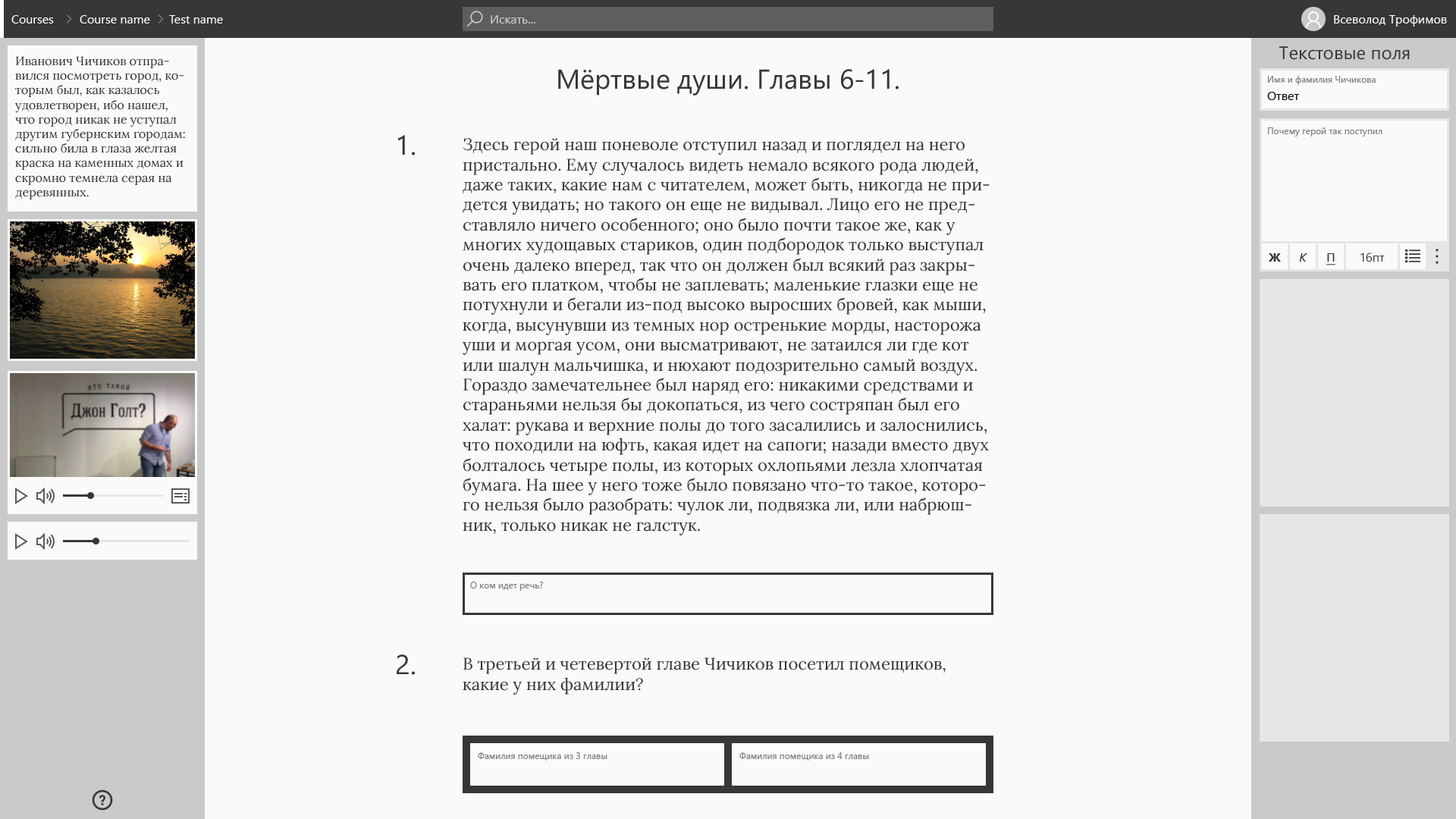
<style>
.page{position:relative;width:1456px;height:819px;background:#fafafa}
.page>*{position:absolute;margin:0}
.t1{font:12.1px "SegoeUI";color:#fafafa}
.t2{font:12.1px "SegoeUI";color:#cacaca}
.t3{font:18.2px "SegoeUI";color:#373737}
.t4{font:12.1px "Lora-Regular";color:#373737}
.t5{font:27.3px "SegoeUI";color:#373737}
.t6{font:9.1px "SegoeUI";color:#808080}
.t7{font:12.1px "SegoeUI";color:#0f0f0f}
.t8{font:16.7px "Lora-Regular";color:#373737}
.t9{font:12.1px "SegoeUI-Bold";color:#373737}
.t10{font:12.1px "SegoeUI-Italic";color:#373737}
.t11{font:12.1px "SegoeUI";color:#373737;text-decoration:underline}
.t12{font:12.1px "SegoeUI";color:#373737}
</style>
<div class="page">
<p class="t1" style="left:11px;top:15px;width:43px;height:9px">Courses</p>
<p class="t1" style="left:80px;top:15px;width:70px;height:9px">Course name</p>
<p class="t1" style="left:169px;top:15px;width:54px;height:9px">Test name</p>
<p class="t2" style="left:491px;top:15px;width:44px;height:9px">Искать...</p>
<p class="t1" style="left:1334px;top:15px;width:113px;height:12px">Всеволод Трофимов</p>
<p class="t3" style="left:1279px;top:46px;width:131px;height:14px">Текстовые поля</p>
<p class="t4" style="left:15px;top:56px;width:170px;height:143px">Иванович Чичиков отправился посмотреть город, которым был, как казалось удовлетворен, ибо нашел, что город никак не уступал другим губернским городам: сильно била в глаза желтая краска на каменных домах и скромно темнела серая на деревянных.</p>
<p class="t5" style="left:558px;top:69px;width:341px;height:27px">Мёртвые души. Главы 6-11.</p>
<p class="t6" style="left:1268px;top:76px;width:108px;height:9px">Имя и фамилия Чичикова</p>
<p class="t7" style="left:1267px;top:92px;width:32px;height:8px">Ответ</p>
<p class="t5" style="left:398px;top:135px;width:17px;height:20px">1.</p>
<p class="t6" style="left:1268px;top:127px;width:114px;height:9px">Почему герой так поступил</p>
<p class="t8" style="left:463px;top:138px;width:527px;height:397px">Здесь герой наш поневоле отступил назад и поглядел на него пристально. Ему случалось видеть немало всякого рода людей, даже таких, какие нам с читателем, может быть, никогда не придется увидать; но такого он еще не видывал. Лицо его не представляло ничего особенного; оно было почти такое же, как у многих худощавых стариков, один подбородок только выступал очень далеко вперед, так что он должен был всякий раз закрывать его платком, чтобы не заплевать; маленькие глазки еще не потухнули и бегали из-под высоко выросших бровей, как мыши, когда, высунувши из темных нор остренькие морды, насторожа уши и моргая усом, они высматривают, не затаился ли где кот или шалун мальчишка, и нюхают подозрительно самый воздух. Гораздо замечательнее был наряд его: никакими средствами и стараньями нельзя бы докопаться, из чего состряпан был его халат: рукава и верхние полы до того засалились и залоснились, что походили на юфть, какая идет на сапоги; назади вместо двух болталось четыре полы, из которых охлопьями лезла хлопчатая бумага. На шее у него тоже было повязано что-то такое, которого нельзя было разобрать: чулок ли, подвязка ли, или набрюшник, только никак не галстук.</p>
<p class="t9" style="left:1269px;top:253px;width:12px;height:9px">Ж</p>
<p class="t10" style="left:1299px;top:253px;width:8px;height:9px">К</p>
<p class="t11" style="left:1326px;top:253px;width:9px;height:12px">П</p>
<p class="t12" style="left:1360px;top:253px;width:25px;height:9px">16пт</p>
<p class="t6" style="left:470px;top:582px;width:74px;height:9px">О ком идет речь?</p>
<p class="t5" style="left:397px;top:654px;width:18px;height:21px">2.</p>
<p class="t8" style="left:463px;top:657px;width:483px;height:38px">В третьей и четевертой главе Чичиков посетил помещиков, какие у них фамилии?</p>
<p class="t6" style="left:478px;top:752px;width:129px;height:9px">Фамилия помещика из 3 главы</p>
<p class="t6" style="left:739px;top:752px;width:130px;height:9px">Фамилия помещика из 4 главы</p>
</div>
